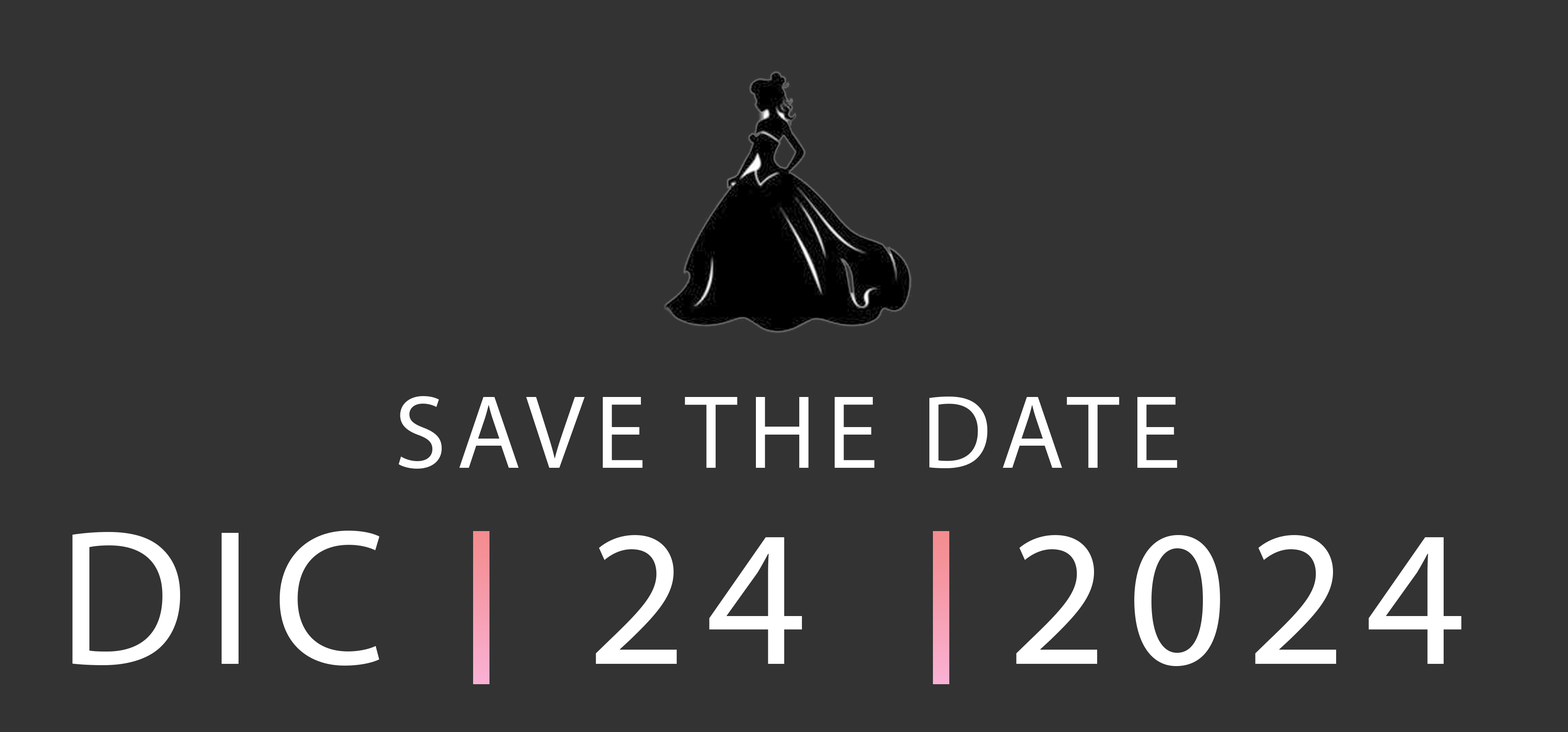
<style>
.page{position:relative;width:1568px;height:732px;background:#333333}
.page>*{position:absolute;margin:0}
.t1{font:104.9px "MyriadPro-Regular";letter-spacing:0.1em;color:#ffffff}
.t2{font:194.6px "MyriadPro-Regular";letter-spacing:0.1em;color:#ffffff}
</style>
<div class="page">
<p class="t1" style="left:398px;top:396px;width:779px;height:73px">SAVE THE DATE</p>
<p class="t2" style="left:72px;top:531px;width:1389px;height:135px">DIC   24   2024</p>
</div>
